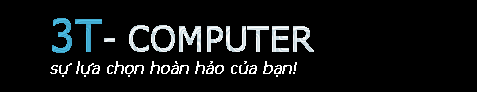
<style>
.page{position:relative;width:477px;height:92px;background:#000000}
.page>*{position:absolute;margin:0}
.t1{font:35px "Tahoma";font-weight:bold}
.t2{font:44px "Tahoma";font-weight:bold}
.t3{font:48px "Tahoma";font-weight:bold;font-style:italic}
.t4{font:16px "Tahoma";color:#ffffff;font-weight:bold;font-style:italic}
</style>
<div class="page">
<p class="t1" style="left:52px;top:18px;width:262px;height:35px"><span class="t2">3T</span>- COMPUTER<br><span class="t3">czxc</span></p>
<p class="t4" style="left:50px;top:61px;width:247px;height:16px">sự lựa chọn hoàn hảo của bạn!</p>
</div>
